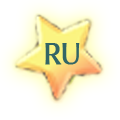
<style>
.page{position:relative;width:120px;height:120px;background:#ffffff}
.page>*{position:absolute;margin:0}
.t1{font:31px "LinuxBiolinumG";letter-spacing:-0.075em;color:#336666;font-weight:bold}
</style>
<div class="page">
<p class="t1" style="left:45px;top:43px;width:35px;height:22px">RU</p>
</div>
